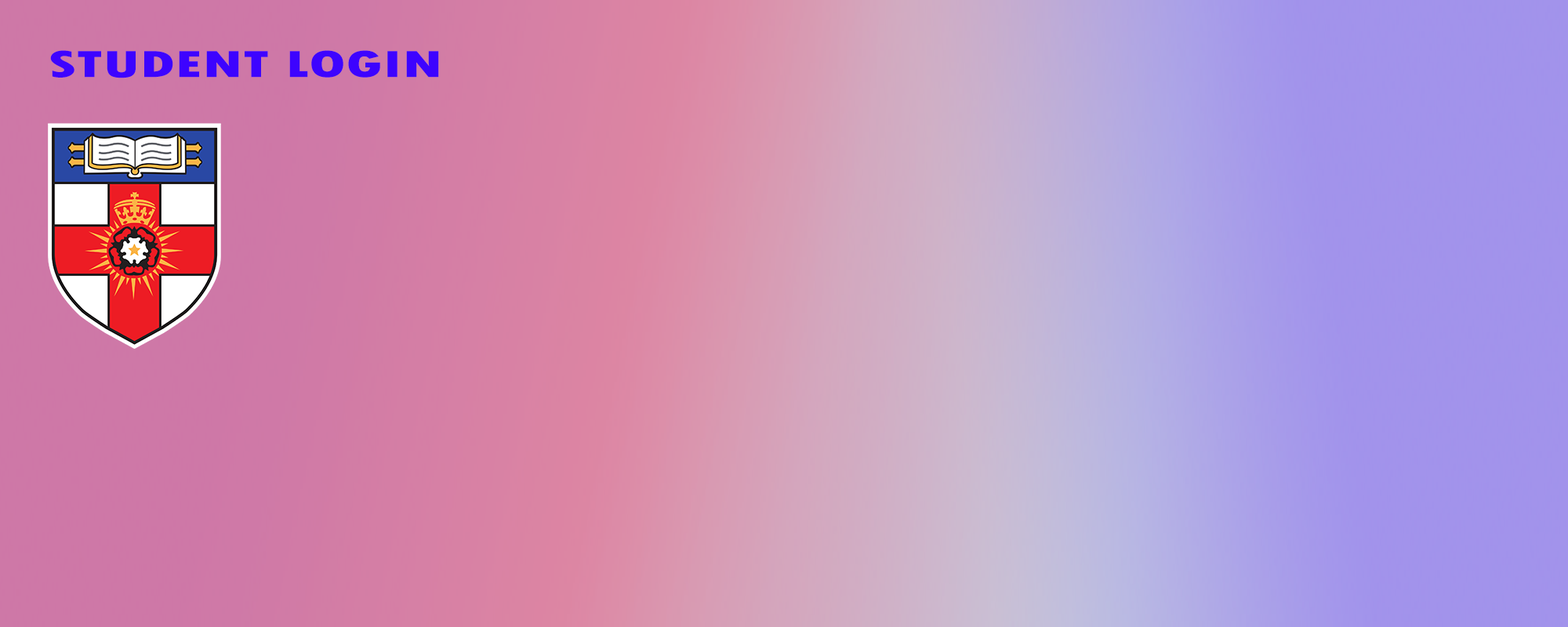
<style>
.page{position:relative;width:1568px;height:627px}
.page>*{position:absolute;margin:0}
.t1{font:39.6px "TwCenMT-CondensedExtraBold";color:#3d03ff;scale:1.67 1}
</style>
<div class="page">
<p class="t1" style="left:50px;top:50px;width:389px;height:28px">STUDENT LOGIN</p>
</div>
